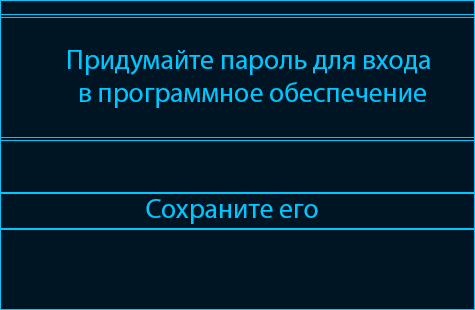
<style>
.page{position:relative;width:475px;height:310px;background:#001523}
.page>*{position:absolute;margin:0}
.t1{font:27.8px "MyriadPro-Regular";color:#00c7ff}
</style>
<div class="page">
<p class="t1" style="left:68px;top:50px;width:362px;height:58px">Придумайте пароль для входа<br>     в программное обеспечение</p>
<p class="t1" style="left:146px;top:199px;width:172px;height:25px">Сохраните его</p>
</div>
